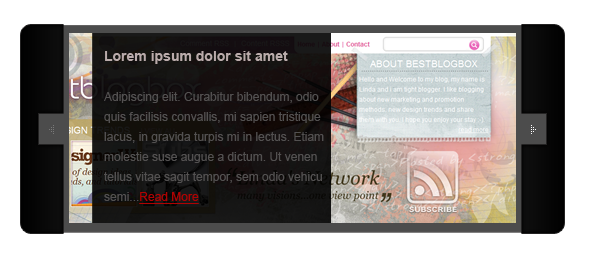
<style>
.page{position:relative;width:590px;height:259px;background:#ffffff}
.page>*{position:absolute;margin:0}
.t1{font:12px/20px "ArialMT";color:#535151}
.t2{font:14px/20px "Arial-BoldMT";color:#baabab}
.t3{font:12px/20px "ArialMT";color:#b00202;text-decoration:underline}
</style>
<div class="page">
<p class="t1" style="left:104px;top:51px;width:220px;height:153px"><span class="t2">Lorem ipsum dolor sit amet<br><br></span>Adipiscing elit. Curabitur bibendum, odio<br>quis facilisis convallis, mi sapien tristique<br>lacus, in gravida turpis mi in lectus. Etiam<br>molestie suse augue a dictum. Ut venen<br>tellus vitae sagit tempor, sem odio vehicu<br>semi...<span class="t3">Read More</span></p>
</div>
